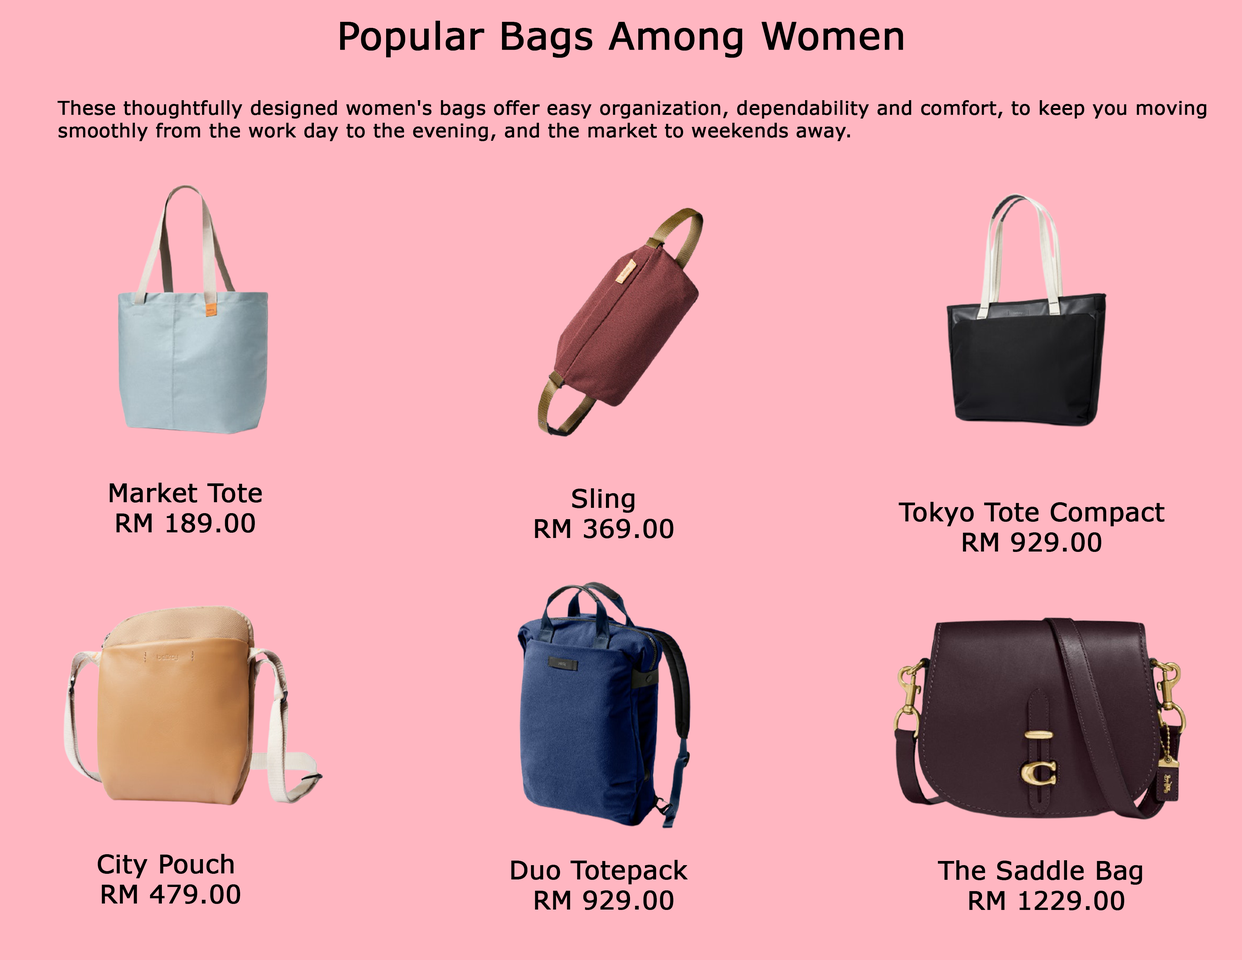
<style>
.page{position:relative;width:1242px;height:960px;background:#ffb6c1}
.page>*{position:absolute;margin:0}
.t1{font:37.6px "Verdana";color:#000000;font-weight:bold}
.t2{font:18.8px "Verdana";color:#000000;font-weight:bold}
.t3{font:25.1px "Verdana";color:#000000;font-weight:bold}
</style>
<div class="page">
<p class="t1" style="left:340px;top:21px;width:563px;height:37px">Popular Bags Among Women</p>
<p class="t2" style="left:58px;top:100px;width:1148px;height:41px">These thoughtfully designed women's bags offer easy organization, dependability and comfort, to keep you moving <br>smoothly from the work day to the evening, and the market to weekends away.</p>
<p class="t3" style="left:110px;top:483px;width:152px;height:50px;text-align:center">Market Tote<br>RM 189.00</p>
<p class="t3" style="left:535px;top:488px;width:138px;height:50px;text-align:center">Sling<br>RM 369.00</p>
<p class="t3" style="left:899px;top:502px;width:266px;height:50px;text-align:center">Tokyo Tote Compact<br>RM 929.00</p>
<p class="t3" style="left:97px;top:854px;width:143px;height:50px;text-align:center">City Pouch <br>RM 479.00</p>
<p class="t3" style="left:511px;top:860px;width:177px;height:50px;text-align:center">Duo Totepack <br>RM 929.00</p>
<p class="t3" style="left:938px;top:860px;width:204px;height:50px;text-align:center">The Saddle Bag <br>RM 1229.00</p>
</div>
